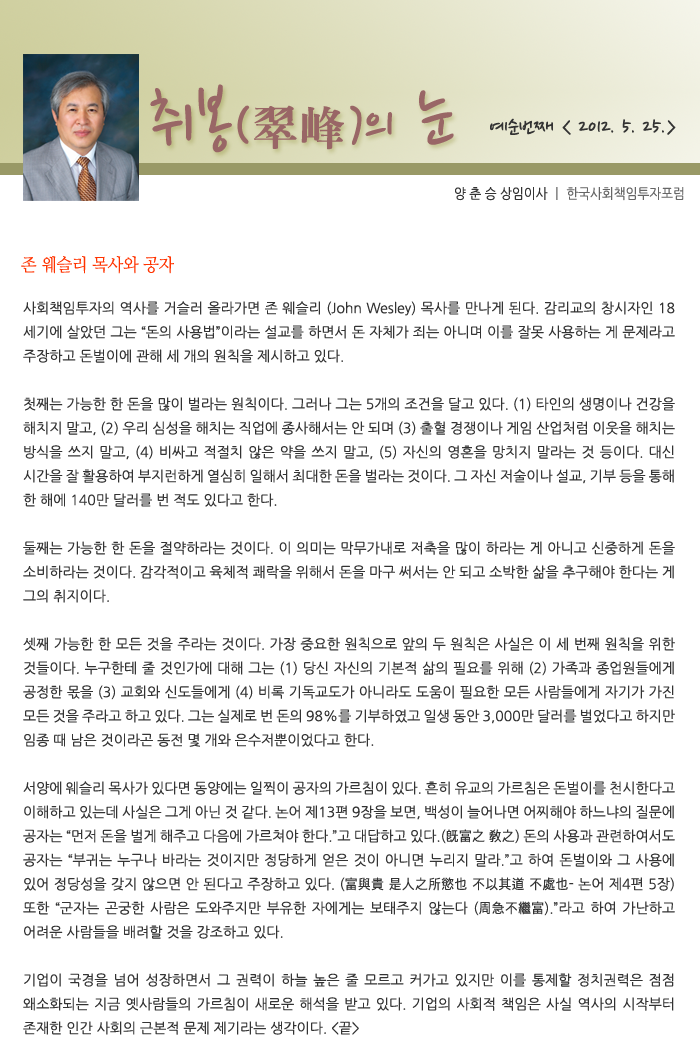
<style>
.page{position:relative;width:700px;height:1061px;background:#ffffff}
.page>*{position:absolute;margin:0}
.t1{font:77.5px "NanumPen";color:#996666}
.t2{font:60px "NanumPen";color:#996666}
.t3{font:48px "H2mjrE";color:#996666}
.t4{font:24px "NanumPen";color:#333333}
.t5{font:14px "NanumGothic";color:#666666;scale:0.9 1}
.t6{font:14px "NanumGothic";color:#333333;scale:0.9 1}
.t7{font:18px "NanumMyeongjo";color:#ff3300;scale:0.9 1}
.t8{font:14px/24px "NanumGothic";color:#333333}
</style>
<div class="page">
<p class="t1" style="left:150px;top:84px;width:304px;height:69px">취봉<span class="t2">(</span><span class="t3">翠峰</span><span class="t2">)</span><span class="t2">의</span> 눈</p>
<p class="t4" style="left:490px;top:118px;width:186px;height:17px">예순번째 &lt; 2012. 5. 25.&gt;</p>
<p class="t5" style="left:455px;top:187px;width:229px;height:14px"><span class="t6">양 춘 승 상임이사 </span>ㅣ 한국사회책임투자포럼</p>
<p class="t7" style="left:21px;top:256px;width:153px;height:18px">존 웨슬리 목사와 공자</p>
<p class="t8" style="left:23px;top:301px;width:652px;height:734px;text-align:justify">사회책임투자의 역사를 거슬러 올라가면 존 웨슬리 (John Wesley) 목사를 만나게 된다. 감리교의 창시자인 18세기에 살았던 그는 “돈의 사용법”이라는 설교를 하면서 돈 자체가 죄는 아니며 이를 잘못 사용하는 게 문제라고 주장하고 돈벌이에 관해 세 개의 원칙을 제시하고 있다.<br><br>첫째는 가능한 한 돈을 많이 벌라는 원칙이다. 그러나 그는 5개의 조건을 달고 있다. (1) 타인의 생명이나 건강을 해치지 말고, (2) 우리 심성을 해치는 직업에 종사해서는 안 되며 (3) 출혈 경쟁이나 게임 산업처럼 이웃을 해치는 방식을 쓰지 말고, (4) 비싸고 적절치 않은 약을 쓰지 말고, (5) 자신의 영혼을 망치지 말라는 것 등이다. 대신 시간을 잘 활용하여 부지런하게 열심히 일해서 최대한 돈을 벌라는 것이다. 그 자신 저술이나 설교, 기부 등을 통해 한 해에 140만 달러를 번 적도 있다고 한다.<br><br>둘째는 가능한 한 돈을 절약하라는 것이다. 이 의미는 막무가내로 저축을 많이 하라는 게 아니고 신중하게 돈을 소비하라는 것이다. 감각적이고 육체적 쾌락을 위해서 돈을 마구 써서는 안 되고 소박한 삶을 추구해야 한다는 게 그의 취지이다.<br><br>셋째 가능한 한 모든 것을 주라는 것이다. 가장 중요한 원칙으로 앞의 두 원칙은 사실은 이 세 번째 원칙을 위한 것들이다. 누구한테 줄 것인가에 대해 그는 (1) 당신 자신의 기본적 삶의 필요를 위해 (2) 가족과 종업원들에게 공정한 몫을 (3) 교회와 신도들에게 (4) 비록 기독교도가 아니라도 도움이 필요한 모든 사람들에게 자기가 가진 모든 것을 주라고 하고 있다. 그는 실제로 번 돈의 98%를 기부하였고 일생 동안 3,000만 달러를 벌었다고 하지만 임종 때 남은 것이라곤 동전 몇 개와 은수저뿐이었다고 한다.<br><br>서양에 웨슬리 목사가 있다면 동양에는 일찍이 공자의 가르침이 있다. 흔히 유교의 가르침은 돈벌이를 천시한다고 이해하고 있는데 사실은 그게 아닌 것 같다. 논어 제13편 9장을 보면, 백성이 늘어나면 어찌해야 하느냐의 질문에 공자는 “먼저 돈을 벌게 해주고 다음에 가르쳐야 한다.”고 대답하고 있다.(旣富之 敎之) 돈의 사용과 관련하여서도 공자는 “부귀는 누구나 바라는 것이지만 정당하게 얻은 것이 아니면 누리지 말라.”고 하여 돈벌이와 그 사용에 있어 정당성을 갖지 않으면 안 된다고 주장하고 있다. (富與貴 是人之所慾也 不以其道 不處也- 논어 제4편 5장) 또한 “군자는 곤궁한 사람은 도와주지만 부유한 자에게는 보태주지 않는다 (周急不繼富).”라고 하여 가난하고 어려운 사람들을 배려할 것을 강조하고 있다.<br><br>기업이 국경을 넘어 성장하면서 그 권력이 하늘 높은 줄 모르고 커가고 있지만 이를 통제할 정치권력은 점점 왜소화되는 지금 옛사람들의 가르침이 새로운 해석을 받고 있다. 기업의 사회적 책임은 사실 역사의 시작부터 존재한 인간 사회의 근본적 문제 제기라는 생각이다. &lt;끝&gt;</p>
</div>
